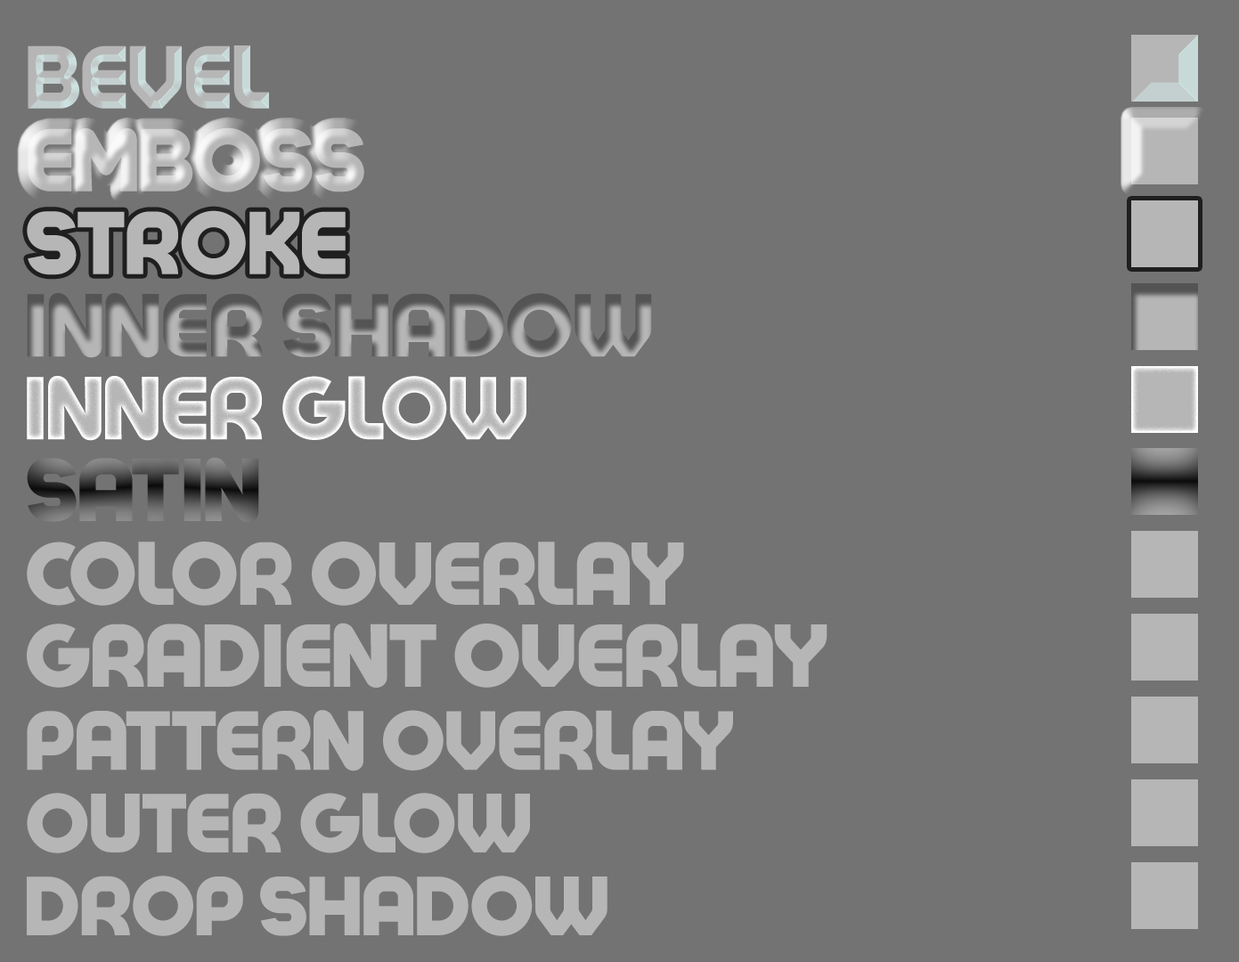
<style>
.page{position:relative;width:1239px;height:962px;background:#737373}
.page>*{position:absolute;margin:0}
.t1{font:87.1px "Colo-Pro-Black";color:#b6b6b6}
.t2{font:87.1px "Colo-Pro-Black"}
.t3{font:82px "Colo-Pro-Black";color:#b6b6b6}
</style>
<div class="page">
<p class="t1" style="left:28px;top:45px;width:241px;height:64px">BEVEL</p>
<p class="t1" style="left:28px;top:127px;width:336px;height:65px">EMBOSS</p>
<p class="t1" style="left:27px;top:210px;width:319px;height:65px">STROKE</p>
<p class="t2" style="left:27px;top:376px;width:500px;height:65px">INNER GLOW</p>
<p class="t2" style="left:27px;top:457px;width:232px;height:65px">SATIN</p>
<p class="t1" style="left:27px;top:542px;width:657px;height:64px">COLOR OVERLAY</p>
<p class="t1" style="left:27px;top:623px;width:801px;height:65px">GRADIENT OVERLAY</p>
<p class="t3" style="left:27px;top:710px;width:706px;height:62px">PATTERN OVERLAY</p>
<p class="t3" style="left:27px;top:793px;width:503px;height:61px">OUTER GLOW</p>
<p class="t3" style="left:27px;top:876px;width:581px;height:60px">DROP SHADOW</p>
</div>
